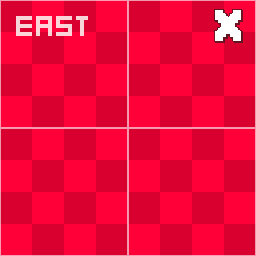
<style>
.page{position:relative;width:256px;height:256px;background:#d90030}
.page>*{position:absolute;margin:0}
.t1{font:32px "Kenney-Mini-Square";color:#f6d4d8}
.t2{font:32px "MINECRAFTPE";color:#6f1423}
</style>
<div class="page">
<p class="t1" style="left:16px;top:16px;width:72px;height:20px">EAST</p>
<p class="t2" style="left:214px;top:9px;width:29px;height:34px">X</p>
</div>
